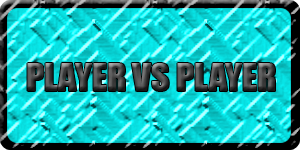
<style>
.page{position:relative;width:300px;height:150px}
.page>*{position:absolute;margin:0}
.t1{font:36px "Impact"}
</style>
<div class="page">
<p class="t1" style="left:27px;top:63px;width:248px;height:28px">PLAYER VS PLAYER</p>
</div>
